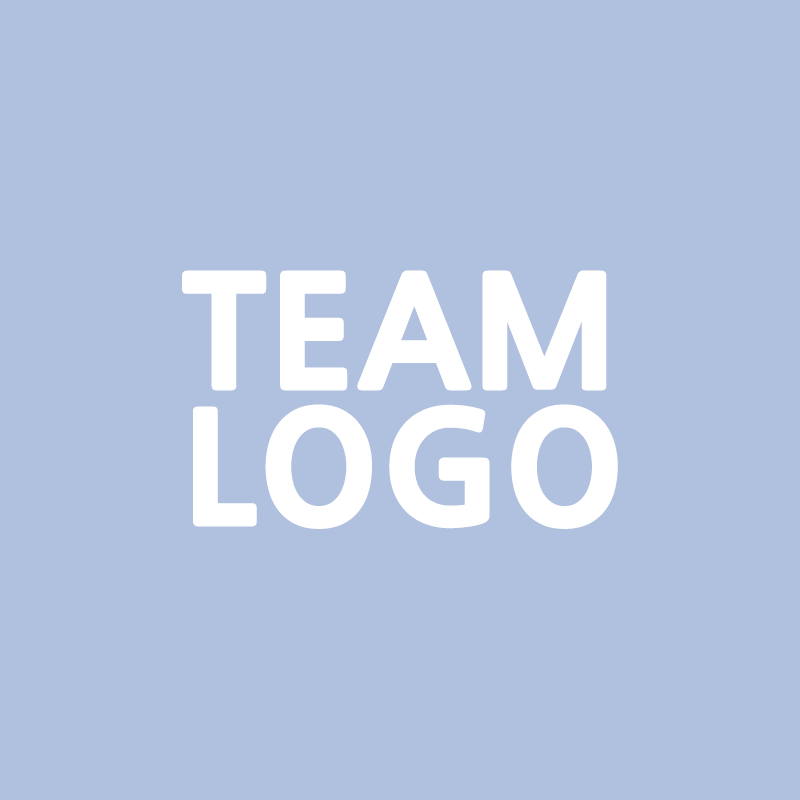
<style>
.page{position:relative;width:800px;height:800px;background:#b0c0df}
.page>*{position:absolute;margin:0}
.t1{font:150px/136px "NanumGothicExtraBold";color:#ffffff;font-weight:bold}
</style>
<div class="page">
<p class="t1" style="left:182px;top:270px;width:436px;height:259px">TEAM<br>LOGO</p>
</div>
